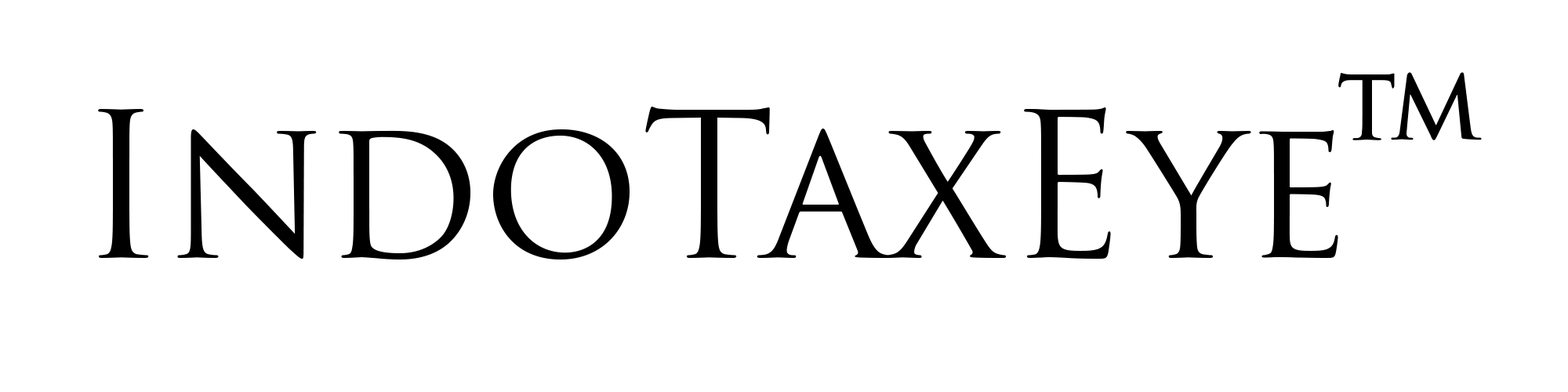
<style>
.page{position:relative;width:1568px;height:392px;background:#ffffff}
.page>*{position:absolute;margin:0}
.t1{font:509.6px "TrajanPro-Regular";color:#000000}
.t2{font:196px "TrajanPro-Regular";color:#000000}
</style>
<div class="page">
<p class="t1" style="left:1338px;top:72px;width:144px;height:68px">™</p>
<p class="t2" style="left:98px;top:107px;width:1240px;height:153px">IndoTaxEye</p>
</div>
